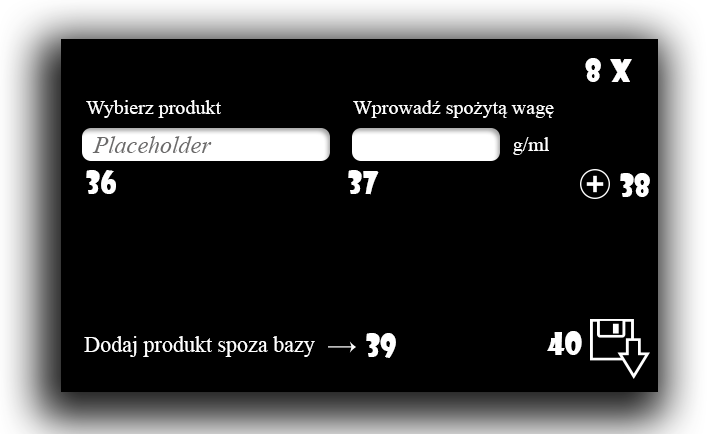
<style>
.page{position:relative;width:716px;height:434px;background:#000000}
.page>*{position:absolute;margin:0}
.t1{font:30px "ShowcardGothic-Reg";color:#ffffff}
.t2{font:30px "ShowcardGothic-Reg";color:#fffefe}
.t3{font:20px "TimesNewRomanPSMT";color:#ffffff}
.t4{font:24px "TimesNewRomanPS-ItalicMT";color:#6b6a6a}
.t5{font:22px "TimesNewRomanPSMT";color:#ffffff}
</style>
<div class="page">
<p class="t1" style="left:585px;top:58px;width:16px;height:24px">8</p>
<p class="t2" style="left:610px;top:59px;width:22px;height:23px">x</p>
<p class="t3" style="left:86px;top:100px;width:135px;height:18px">Wybierz produkt</p>
<p class="t3" style="left:353px;top:100px;width:201px;height:18px">Wprowadź spożytą wagę</p>
<p class="t4" style="left:92px;top:136px;width:120px;height:17px">Placeholder</p>
<p class="t3" style="left:513px;top:137px;width:36px;height:18px">g/ml</p>
<p class="t1" style="left:86px;top:170px;width:30px;height:24px">36</p>
<p class="t1" style="left:348px;top:170px;width:31px;height:25px">37</p>
<p class="t1" style="left:620px;top:173px;width:30px;height:24px">38</p>
<p class="t5" style="left:84px;top:336px;width:231px;height:21px">Dodaj produkt spoza bazy</p>
<p class="t1" style="left:366px;top:333px;width:30px;height:25px">39</p>
<p class="t1" style="left:547px;top:331px;width:35px;height:24px">40</p>
</div>
